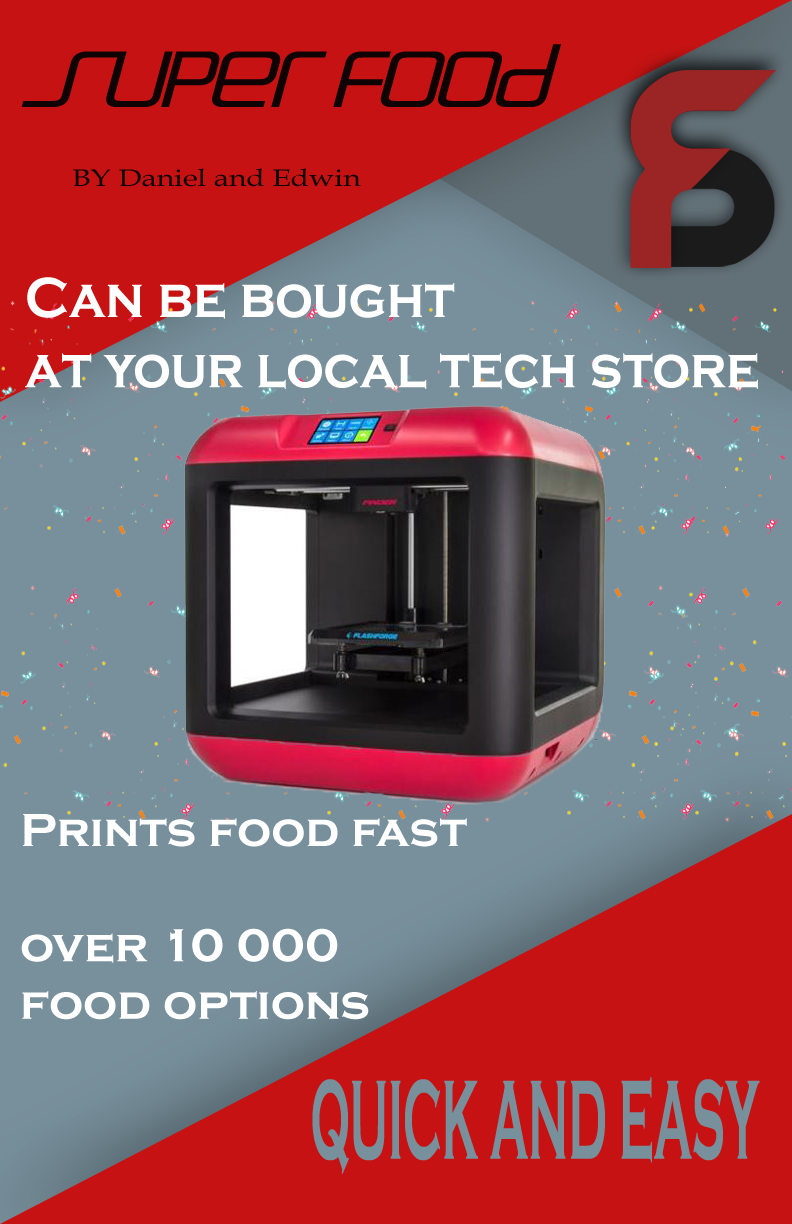
<style>
.page{position:relative;width:792px;height:1224px;background:#c61212}
.page>*{position:absolute;margin:0}
.t1{font:110px "Stasmic";color:#0f0303;scale:0.42 1}
.t2{font:299px "SUPERHERO";letter-spacing:0.02em}
.t3{font:302px "SUPERHERO";letter-spacing:0.02em;color:#9b2425}
.t4{font:24px "BookAntiqua";color:#0f0303;scale:1.26 1}
.t5{font:58.7px "CopperplateGothic-Bold";color:#ffffff;scale:0.89 1}
.t6{font:48px "CopperplateGothic-Bold";color:#ffffff}
.t7{font:117.2px "CopperplateGothic-Bold";color:#78909c;scale:0.4 1}
</style>
<div class="page">
<p class="t1" style="left:21px;top:44px;width:540px;height:63px">Super food</p>
<p class="t2" style="left:630px;top:70px;width:145px;height:197px">S</p>
<p class="t3" style="left:630px;top:70px;width:146px;height:198px">F</p>
<p class="t4" style="left:73px;top:168px;width:288px;height:19px">BY Daniel and Edwin</p>
<p class="t5" style="left:25px;top:277px;width:733px;height:112px">Can be bought <br>at your local tech store</p>
<p class="t6" style="left:21px;top:814px;width:446px;height:206px">Prints food fast<br><br>over 10 000 <br>food options</p>
<p class="t7" style="left:312px;top:1077px;width:448px;height:97px">QUICK AND EASY</p>
</div>
